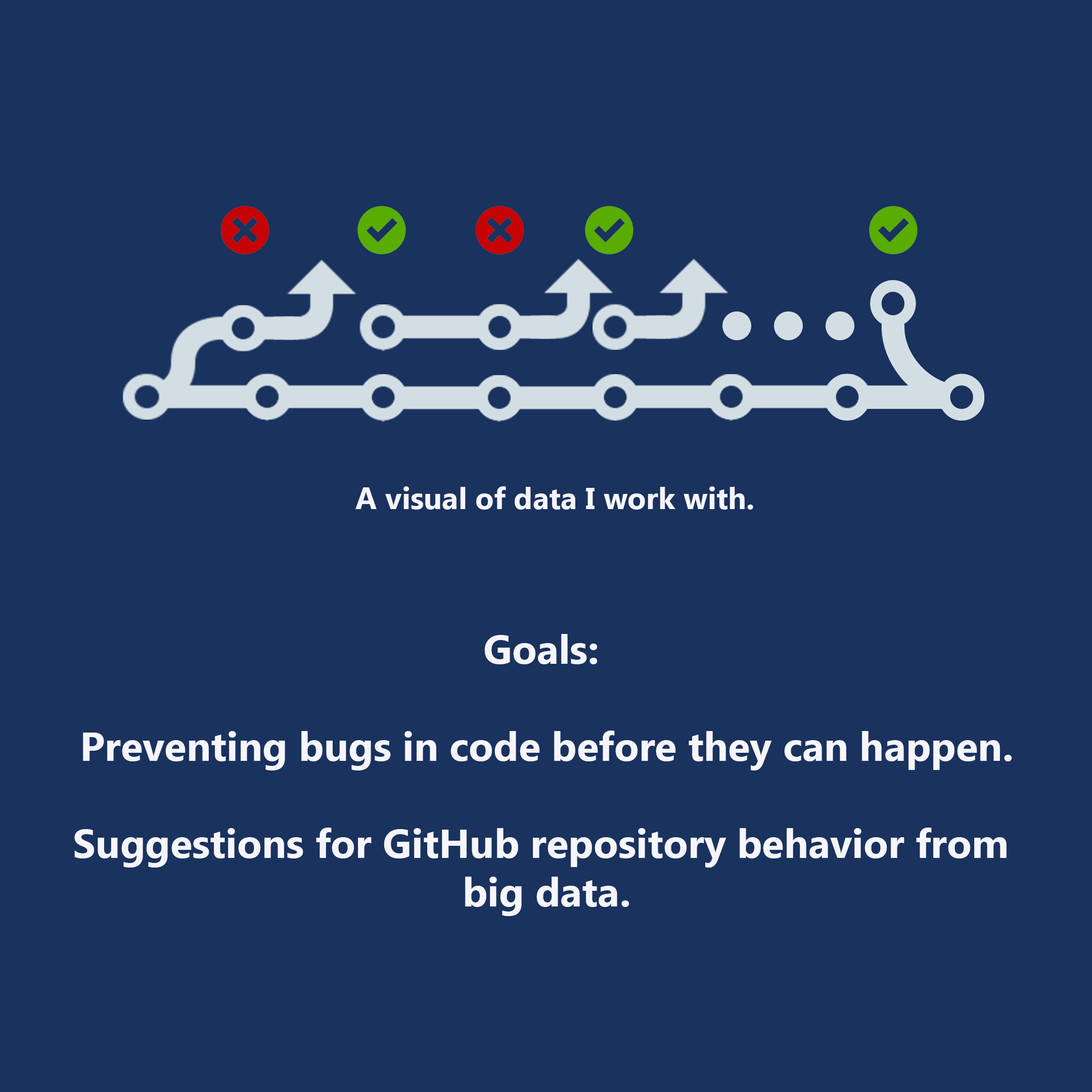
<style>
.page{position:relative;width:1092px;height:1092px;background:#19325e}
.page>*{position:absolute;margin:0}
.t1{font:30.3px "Ebrima-Bold";color:#f6f5fd}
.t2{font:40.4px "Ebrima-Bold";color:#f6f5fd}
</style>
<div class="page">
<p class="t1" style="left:355px;top:486px;width:398px;height:24px">A visual of data I work with.</p>
<p class="t2" style="left:74px;top:634px;width:938px;height:282px;text-align:center">Goals: <br><br>Preventing bugs in code before they can happen.<br><br>Suggestions for GitHub repository behavior from <br>big data.</p>
</div>
